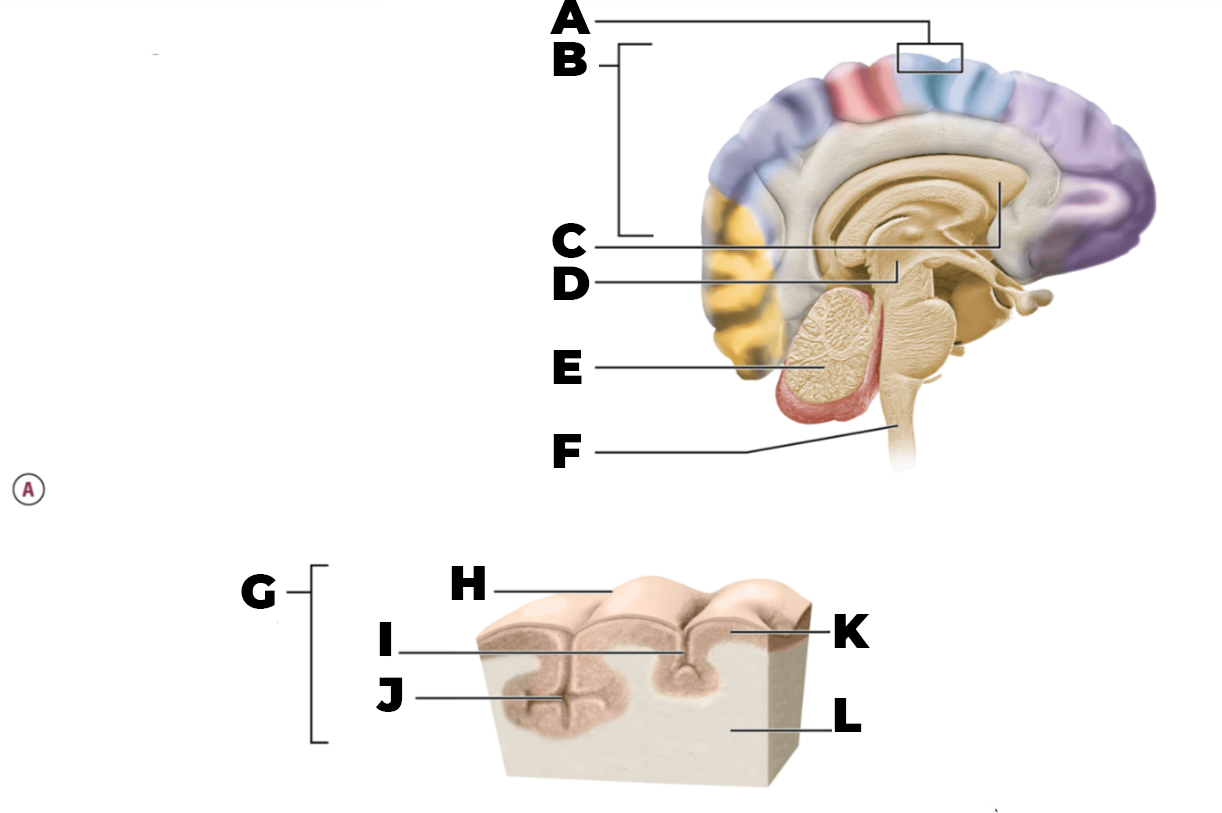
<style>
.page{position:relative;width:1222px;height:813px;background:#ffffff}
.page>*{position:absolute;margin:0}
.t1{font:48px/14px "Montserrat-Black";color:#000000}
.t2{font:48px "Montserrat-Black";color:#000000}
</style>
<div class="page">
<p class="t1" style="left:550px;top:0px;width:41px;height:468px">A<br><br><br>B<br><br><br><br><br><br><br><br><br><br><br><br><br>C<br><br><br>D<br><br><br><br><br><br>E<br><br><br><br><br><br>F</p>
<p class="t1" style="left:375px;top:566px;width:110px;height:146px">H<br><br><br><br>I<br><br><br><br>J</p>
<p class="t2" style="left:241px;top:574px;width:35px;height:35px">G</p>
<p class="t1" style="left:834px;top:614px;width:36px;height:118px">K<br><br><br><br><br><br>L</p>
</div>
